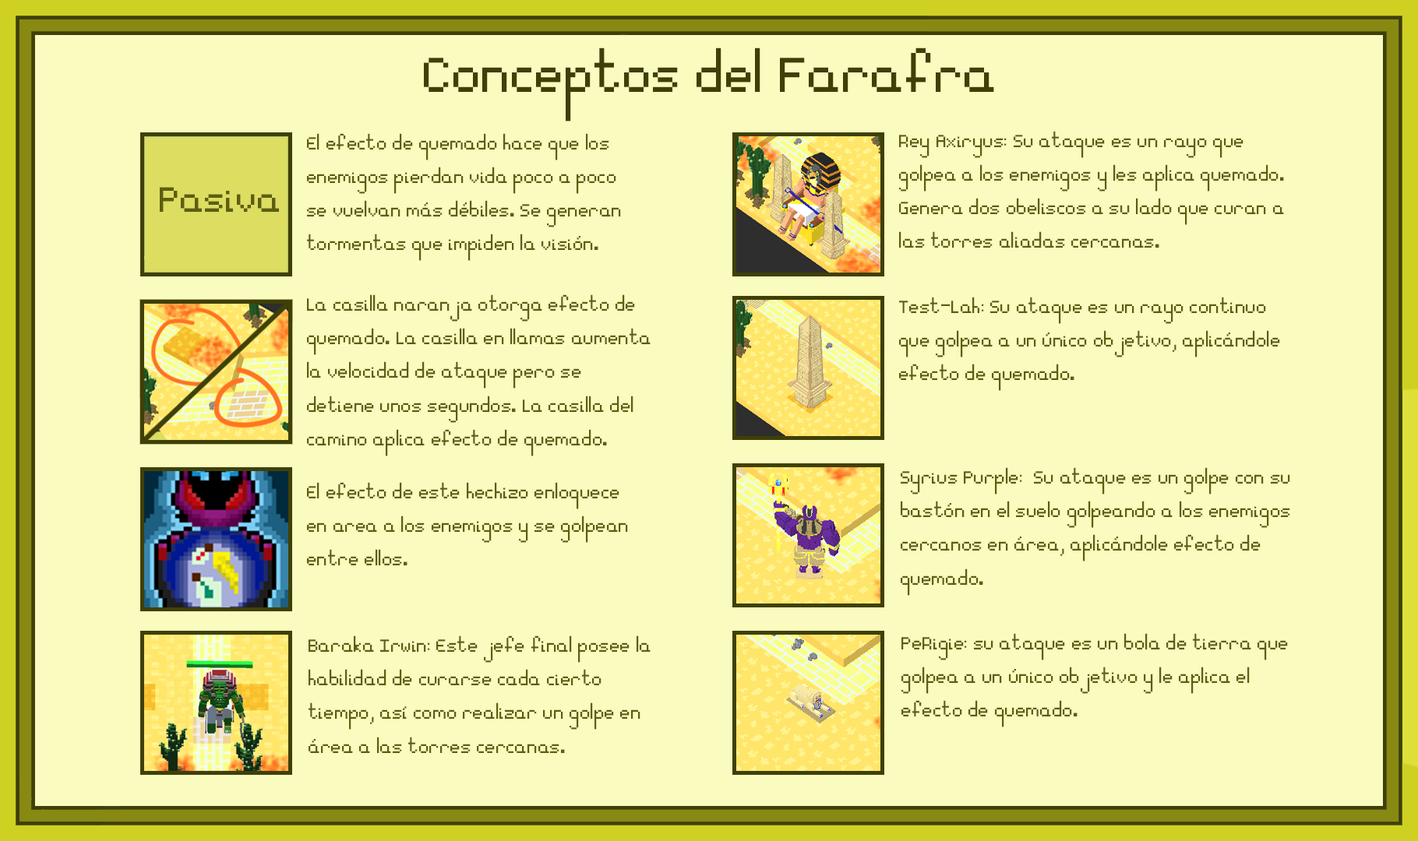
<style>
.page{position:relative;width:1418px;height:841px;background:#fafbbe}
.page>*{position:absolute;margin:0}
.t1{font:77.9px "Essential";color:#3f4007}
.t2{font:28px "Essential";color:#5d5e10}
.t3{font:56.1px "Essential";color:#5d5e10}
</style>
<div class="page">
<p class="t1" style="left:424px;top:48px;width:570px;height:74px">Conceptos del Farafra</p>
<p class="t2" style="left:307px;top:133px;width:314px;height:128px">El efecto de quemado hace que los <br>enemigos pierdan vida poco a poco <br>se vuelvan más débiles. Se generan <br>tormentas que impiden la visión.</p>
<p class="t2" style="left:899px;top:131px;width:385px;height:117px">Rey Axiryus: Su ataque es un rayo que <br>golpea a los enemigos y les aplica quemado.<br>Genera dos obeliscos a su lado que curan a<br>las torres aliadas cercanas.</p>
<p class="t3" style="left:160px;top:187px;width:119px;height:25px">Pasiva</p>
<p class="t2" style="left:307px;top:294px;width:343px;height:162px">La casilla naranja otorga efecto de <br>quemado. La casilla en llamas aumenta<br>la velocidad de ataque pero se <br>detiene unos segundos. La casilla del <br>camino aplica efecto de quemado.</p>
<p class="t2" style="left:899px;top:297px;width:381px;height:94px">Test-Lah: Su ataque es un rayo continuo <br>que golpea a un único objetivo, aplicándole<br>efecto de quemado.</p>
<p class="t2" style="left:900px;top:467px;width:390px;height:129px">Syrius Purple:  Su ataque es un golpe con su<br>bastón en el suelo golpeando a los enemigos <br>cercanos en área, aplicándole efecto de<br>quemado.</p>
<p class="t2" style="left:307px;top:482px;width:321px;height:83px">El efecto de este hechizo enloquece<br>en area a los enemigos y se golpean <br>entre ellos.</p>
<p class="t2" style="left:308px;top:636px;width:342px;height:117px">Baraka Irwin: Este jefe final posee la<br>habilidad de curarse cada cierto <br>tiempo, así como realizar un golpe en<br>área a las torres cercanas.</p>
<p class="t2" style="left:901px;top:633px;width:386px;height:94px">PeRigie: su ataque es un bola de tierra que<br>golpea a un único objetivo y le aplica el<br>efecto de quemado.</p>
</div>
